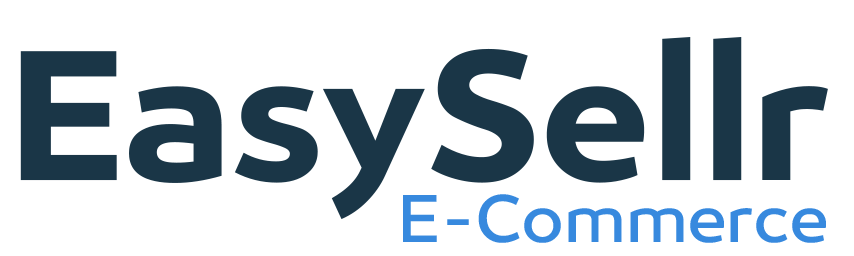
<style>
.page{position:relative;width:854px;height:256px;background:#ffffff}
.page>*{position:absolute;margin:0}
.t1{font:184.5px "Ergonomique-Bold";color:#1a3647}
.t2{font:67px "Ergonomique-Medium";color:#3789de}
</style>
<div class="page">
<p class="t1" style="left:20px;top:37px;width:808px;height:183px">EasySellr</p>
<p class="t2" style="left:403px;top:194px;width:423px;height:49px">E-Commerce</p>
</div>
